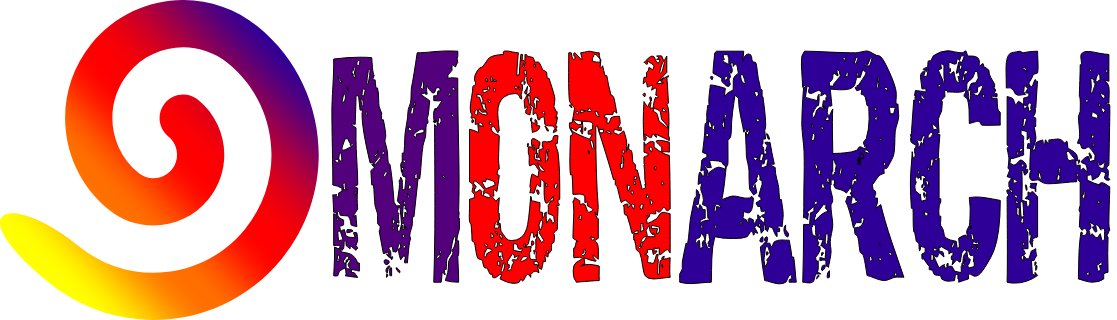
<style>
.page{position:relative;width:1117px;height:320px;background:#ffffff}
.page>*{position:absolute;margin:0}
.t1{font:231px "Destroy";color:#2e0098;scale:0.52 1}
.t2{font:231px "Destroy";color:#53007d;scale:0.52 1}
.t3{font:231px "Destroy";color:#fe0001;scale:0.52 1}
</style>
<div class="page">
<p class="t1" style="left:330px;top:49px;width:781px;height:236px"><span class="t2">M</span><span class="t3">ON</span>ARCH</p>
</div>
